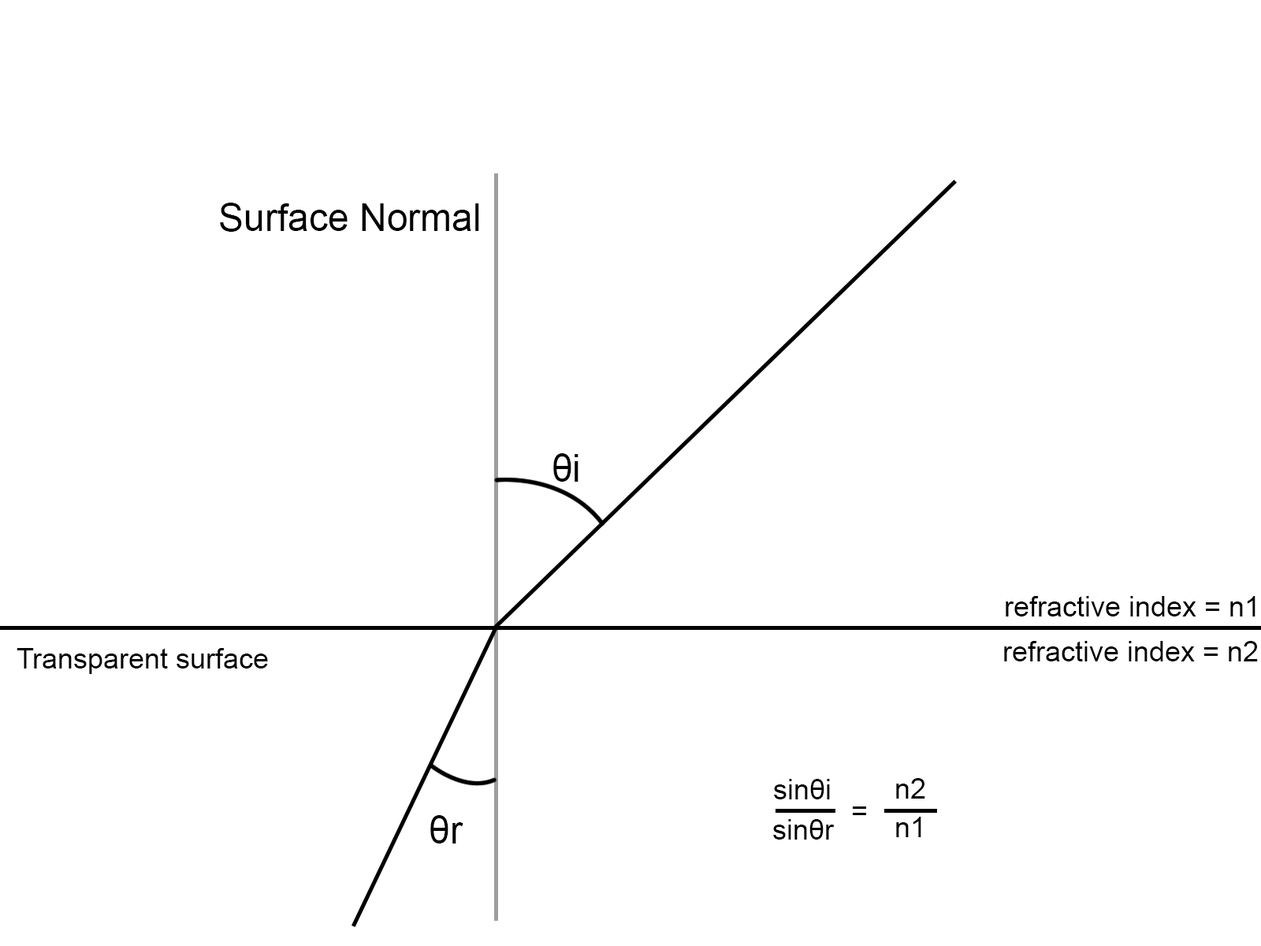
<style>
.page{position:relative;width:1261px;height:946px;background:#ffffff}
.page>*{position:absolute;margin:0}
.t1{font:37.8px "ArialMT";color:#000000}
.t2{font:28.4px "ArialMT";color:#000000}
</style>
<div class="page">
<p class="t1" style="left:220px;top:203px;width:259px;height:29px">Surface Normal</p>
<p class="t1" style="left:553px;top:453px;width:25px;height:29px">θi</p>
<p class="t2" style="left:1006px;top:596px;width:249px;height:20px">refractive index = n1</p>
<p class="t2" style="left:1004px;top:641px;width:254px;height:20px">refractive index = n2</p>
<p class="t2" style="left:17px;top:648px;width:251px;height:26px">Transparent surface</p>
<p class="t2" style="left:774px;top:779px;width:56px;height:20px">sinθi</p>
<p class="t2" style="left:896px;top:778px;width:29px;height:20px">n2</p>
<p class="t2" style="left:853px;top:806px;width:13px;height:9px">=</p>
<p class="t1" style="left:430px;top:815px;width:33px;height:28px">θr</p>
<p class="t2" style="left:773px;top:819px;width:62px;height:20px">sinθr</p>
<p class="t2" style="left:896px;top:816px;width:25px;height:21px">n1</p>
</div>
